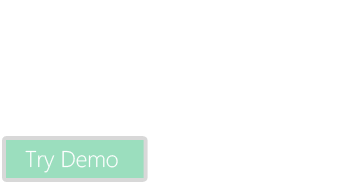
<style>
.page{position:relative;width:337px;height:182px;background:#ffffff}
.page>*{position:absolute;margin:0}
.t1{font:22.6px "SegoeWPN-Light";color:#ffffff}
</style>
<div class="page">
<p class="t1" style="left:25px;top:150px;width:93px;height:23px">Try Demo</p>
</div>
